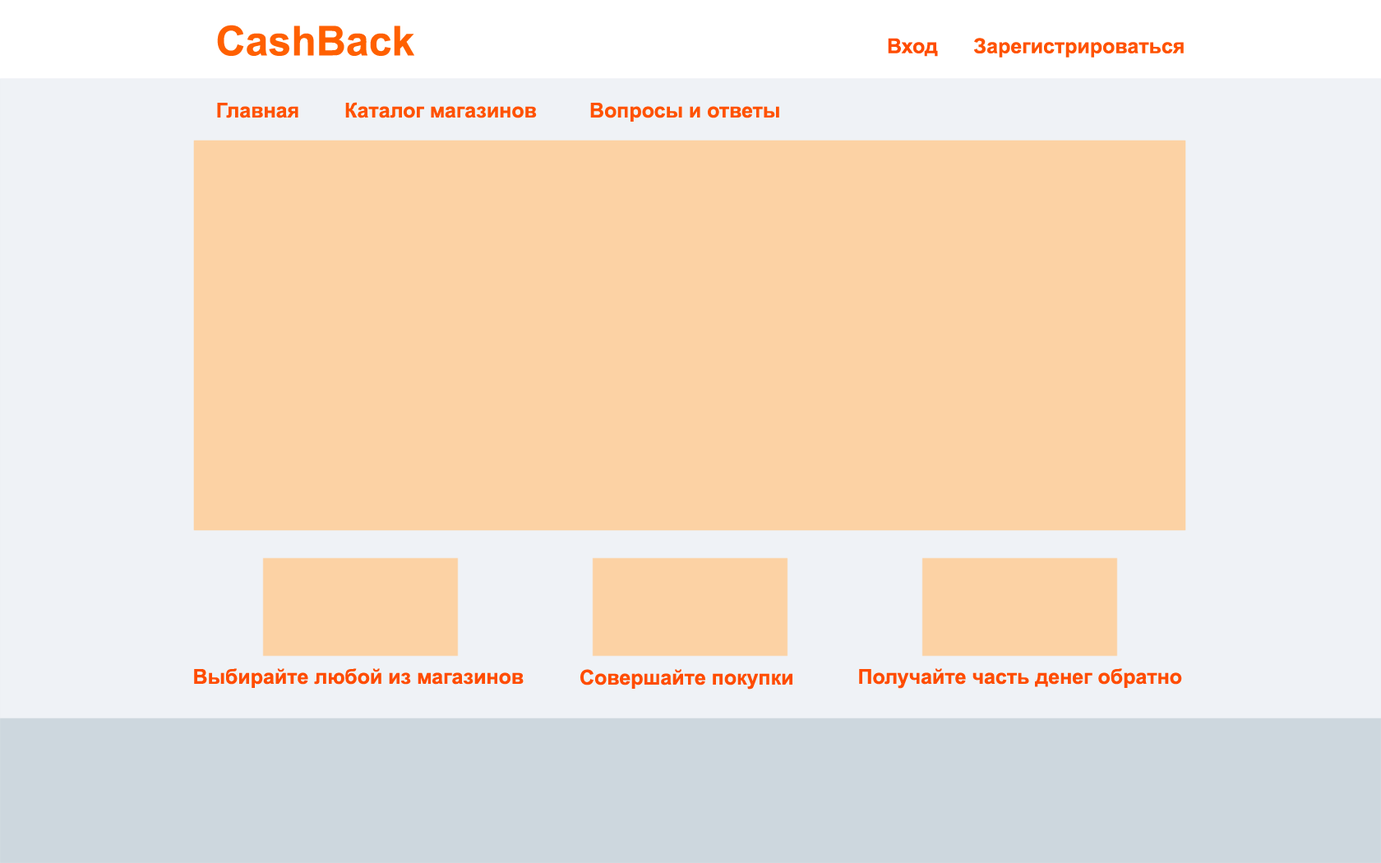
<style>
.page{position:relative;width:1381px;height:863px;background:#fcd2a4}
.page>*{position:absolute;margin:0}
.t1{font:41.1px "Arial-BoldMT";color:#ff6000}
.t2{font:20.6px "Arial-BoldMT";color:#ff4c00}
.t3{font:20.6px "Arial-BoldMT";color:#ff5200}
</style>
<div class="page">
<p class="t1" style="left:217px;top:25px;width:197px;height:31px">CashBack</p>
<p class="t2" style="left:888px;top:38px;width:50px;height:19px">Вход</p>
<p class="t3" style="left:974px;top:38px;width:210px;height:20px">Зарегистрироваться</p>
<p class="t3" style="left:345px;top:102px;width:192px;height:16px">Каталог магазинов</p>
<p class="t3" style="left:217px;top:103px;width:81px;height:15px">Главная</p>
<p class="t3" style="left:590px;top:103px;width:189px;height:19px">Вопросы и ответы</p>
<p class="t2" style="left:194px;top:668px;width:330px;height:20px">Выбирайте любой из магазинов</p>
<p class="t2" style="left:580px;top:669px;width:213px;height:21px">Совершайте покупки</p>
<p class="t2" style="left:859px;top:668px;width:323px;height:21px">Получайте часть денег обратно</p>
</div>
